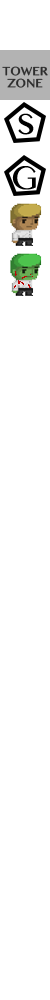
<style>
.page{position:relative;width:50px;height:1000px;background:#ffffff}
.page>*{position:absolute;margin:0}
.t1{font:10.5px "BanglaMN";color:#2e2e2e;font-weight:bold}
</style>
<div class="page">
<p class="t1" style="left:2px;top:66px;width:46px;height:22px;text-align:center">TOWER<br>ZONE</p>
</div>
